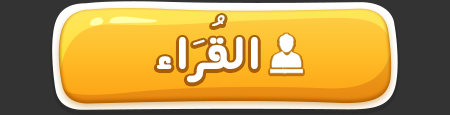
<style>
.page{position:relative;width:450px;height:115px;background:#333333}
.page>*{position:absolute;margin:0}
.t1{font:48px "ANegaar-Bold";letter-spacing:0.05em;color:#ffffff}
</style>
<div class="page">
<p class="t1" style="left:157px;top:15px;width:101px;height:68px">القُرَاء</p>
</div>
